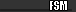
<style>
.page{position:relative;width:76px;height:12px;background:#333333}
.page>*{position:absolute;margin:0}
.t1{font:11px "Impact";color:#ffffff}
</style>
<div class="page">
<p class="t1" style="left:50px;top:1px;width:17px;height:9px">FSM</p>
</div>
